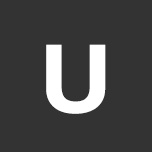
<style>
.page{position:relative;width:152px;height:152px;background:#333333}
.page>*{position:absolute;margin:0}
.t1{font:95px "OpenSans-Bold";color:#ffffff;scale:1.06 1}
</style>
<div class="page">
<p class="t1" style="left:46px;top:44px;width:60px;height:70px">U</p>
</div>
